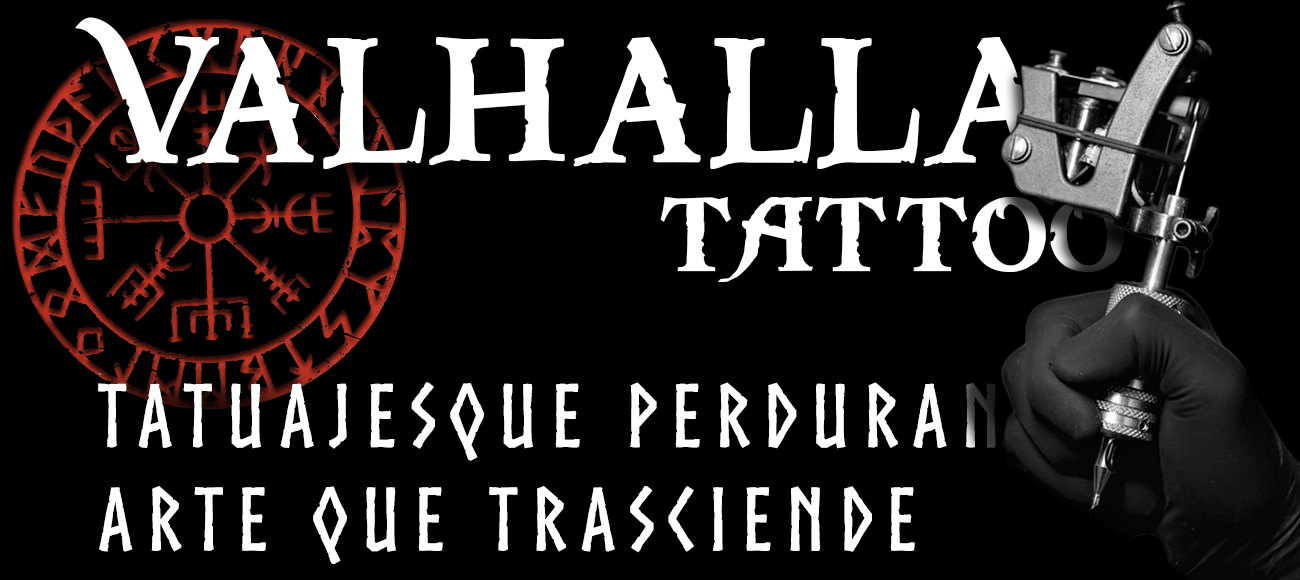
<style>
.page{position:relative;width:1300px;height:580px;background:#000000}
.page>*{position:absolute;margin:0}
.t1{font:188.7px "PiecesofEight";color:#ffffff}
.t2{font:209.8px "PiecesofEight";color:#ffffff}
.t3{font:86.2px "Norse-Bold";letter-spacing:0.15em;color:#ffffff}
</style>
<div class="page">
<p class="t1" style="left:75px;top:17px;width:976px;height:152px">VALHALLA</p>
<p class="t2" style="left:660px;top:197px;width:464px;height:85px">tattoo</p>
<p class="t3" style="left:98px;top:382px;width:931px;height:183px">tatuajesque perduran, arte que trasciende</p>
</div>
